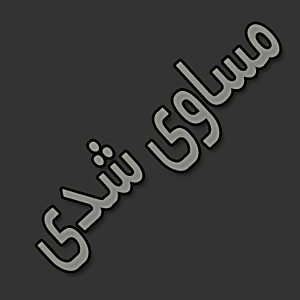
<style>
.page{position:relative;width:300px;height:300px;background:#333333}
.page>*{position:absolute;margin:0}
.t1{font:107.8px "BYekan";color:#94948e;scale:0.64 1}
</style>
<div class="page">
<p class="t1" style="left:37px;top:24px;width:243px;height:247px;rotate:-43deg">مساوی شدی</p>
</div>
